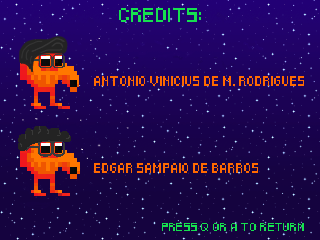
<style>
.page{position:relative;width:320px;height:240px}
.page>*{position:absolute;margin:0}
.t1{font:12px "Pixeled";letter-spacing:0.014em;color:#16e04f}
.t2{font:8px "Pixeled";color:#ff6a00}
.t3{font:7px "Pixeled";letter-spacing:0.04em;color:#16e04f}
</style>
<div class="page">
<p class="t1" style="left:119px;top:8px;width:82px;height:14px">CREDITS:</p>
<p class="t2" style="left:94px;top:76px;width:210px;height:10px">ANTONIO VINICIUS DE M. RODRIGUES</p>
<p class="t2" style="left:94px;top:163px;width:164px;height:10px">EDGAR SAMPAIO DE BARROS</p>
<p class="t3" style="left:162px;top:223px;width:142px;height:8px">PRESS Q OR A TO RETURN</p>
</div>
